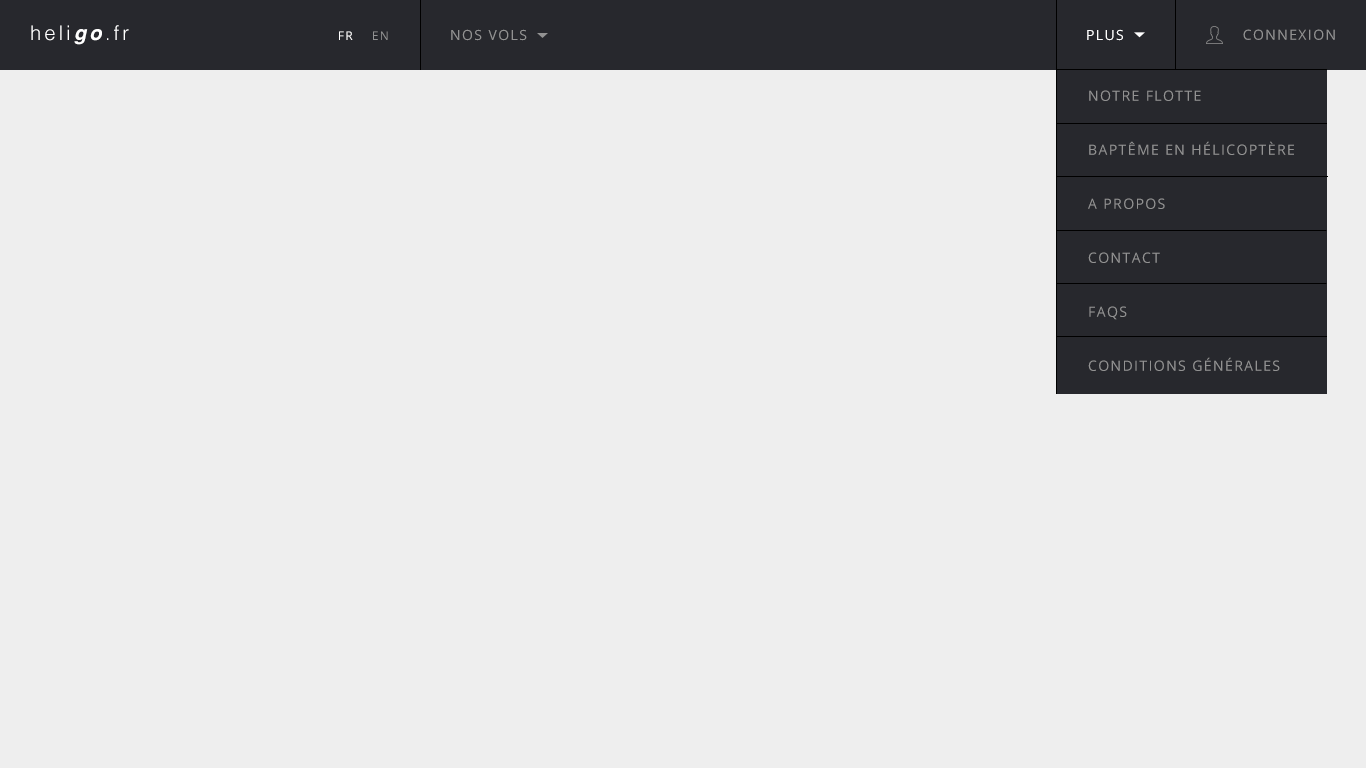
<style>
.page{position:relative;width:1366px;height:768px;background:#eeeeee}
.page>*{position:absolute;margin:0}
.t1{font:20px "Helvetica-Light";letter-spacing:0.16em;color:#ffffff}
.t2{font:20px "Helvetica-BoldOblique";letter-spacing:0.16em;color:#ffffff}
.t3{font:14px "OpenSans";letter-spacing:0.1em;color:#929292;text-transform:uppercase}
.t4{font:14px "OpenSans";letter-spacing:0.1em;color:#ffffff;text-transform:uppercase}
.t5{font:12px "OpenSans";letter-spacing:0.1em;color:#ffffff;text-transform:uppercase}
.t6{font:12px "OpenSans";letter-spacing:0.1em;color:#929292;text-transform:uppercase}
.t7{font:14px/54px "OpenSans";letter-spacing:0.1em;color:#929292;text-transform:uppercase}
</style>
<div class="page">
<p class="t1" style="left:31px;top:25px;width:98px;height:20px">heli<span class="t2">go</span>.fr</p>
<p class="t3" style="left:451px;top:29px;width:76px;height:12px">nos vols</p>
<p class="t4" style="left:1087px;top:29px;width:36px;height:12px">plus</p>
<p class="t3" style="left:1243px;top:29px;width:92px;height:11px">connexion</p>
<p class="t5" style="left:339px;top:31px;width:14px;height:9px">Fr</p>
<p class="t6" style="left:373px;top:31px;width:15px;height:9px">En</p>
<p class="t7" style="left:1088px;top:90px;width:206px;height:281px">Notre flotte<br>baptême en Hélicoptère<br>a propos<br>contact<br>faqs<br>conditions générales</p>
</div>
